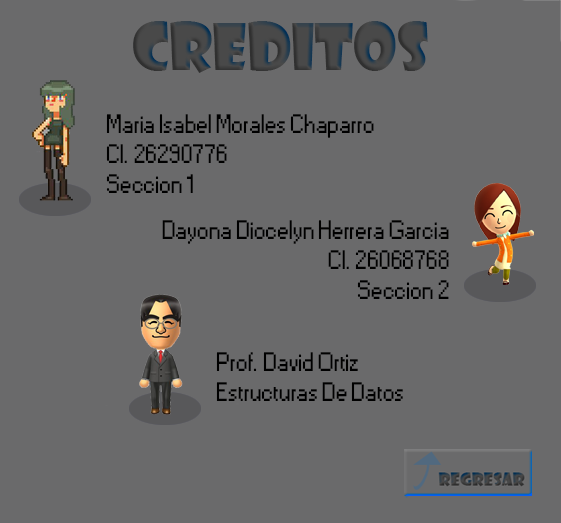
<style>
.page{position:relative;width:561px;height:523px;background:#6a6a6b}
.page>*{position:absolute;margin:0}
.t1{font:25px "Small Fonts";color:#000000}
</style>
<div class="page">
<p class="t1" style="left:106px;top:114px;width:268px;height:79px">Maria Isabel Morales Chaparro<br>CI. 26290776 <br>Seccion 1</p>
<p class="t1" style="left:162px;top:220px;width:287px;height:79px;text-align:right">Dayona Diocelyn Herrera Garcia<br>CI. 26068768<br>Seccion 2</p>
<p class="t1" style="left:216px;top:352px;width:187px;height:49px">Prof. David Ortiz<br>Estructuras De Datos</p>
</div>
